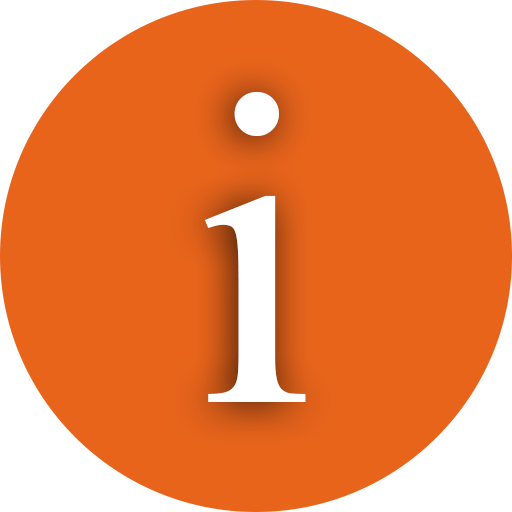
<style>
.page{position:relative;width:512px;height:512px;background:#e8641b}
.page>*{position:absolute;margin:0}
.t1{font:666.7px "Microsoft-Himalaya";color:#ffffff}
</style>
<div class="page">
<p class="t1" style="left:205px;top:91px;width:101px;height:311px">i</p>
</div>
